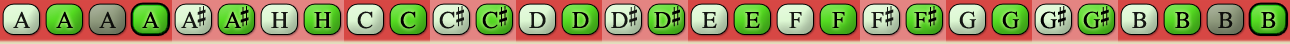
<style>
.page{position:relative;width:1290px;height:44px}
.page>*{position:absolute;margin:0}
.t1{font:24px "OpusChords";letter-spacing:-0.1em;color:#000000}
.t2{font:24px "OpusChords";color:#000000}
.t3{font:24px "OpusChords";letter-spacing:-0.025em;color:#000000}
</style>
<div class="page">
<p class="t1" style="left:181px;top:6px;width:25px;height:22px;opacity:0.9">A#</p>
<p class="t1" style="left:224px;top:6px;width:25px;height:22px">A#</p>
<p class="t2" style="left:439px;top:6px;width:25px;height:23px;opacity:0.9">C#</p>
<p class="t2" style="left:482px;top:6px;width:25px;height:23px">C#</p>
<p class="t3" style="left:611px;top:6px;width:26px;height:22px;opacity:0.9">D#</p>
<p class="t3" style="left:654px;top:6px;width:26px;height:22px">D#</p>
<p class="t2" style="left:871px;top:6px;width:23px;height:22px;opacity:0.9">F#</p>
<p class="t2" style="left:914px;top:6px;width:23px;height:22px">F#</p>
<p class="t3" style="left:1040px;top:6px;width:26px;height:23px">G#</p>
<p class="t3" style="left:1083px;top:6px;width:26px;height:23px">G#</p>
<p class="t2" style="left:13px;top:11px;width:17px;height:17px;opacity:0.9">A</p>
<p class="t2" style="left:56px;top:11px;width:17px;height:17px">A</p>
<p class="t2" style="left:99px;top:11px;width:17px;height:17px;opacity:0.9">A</p>
<p class="t2" style="left:142px;top:11px;width:17px;height:17px">A</p>
<p class="t2" style="left:271px;top:12px;width:17px;height:16px;opacity:0.9">H</p>
<p class="t2" style="left:314px;top:12px;width:17px;height:16px">H</p>
<p class="t2" style="left:357px;top:11px;width:16px;height:18px;opacity:0.9">C</p>
<p class="t2" style="left:400px;top:11px;width:16px;height:18px">C</p>
<p class="t2" style="left:529px;top:12px;width:17px;height:16px;opacity:0.9">D</p>
<p class="t2" style="left:572px;top:12px;width:17px;height:16px">D</p>
<p class="t2" style="left:702px;top:12px;width:15px;height:16px;opacity:0.9">E</p>
<p class="t2" style="left:745px;top:12px;width:15px;height:16px">E</p>
<p class="t2" style="left:789px;top:12px;width:13px;height:16px;opacity:0.9">F</p>
<p class="t2" style="left:832px;top:12px;width:13px;height:16px">F</p>
<p class="t2" style="left:959px;top:11px;width:17px;height:18px;opacity:0.9">G</p>
<p class="t2" style="left:1002px;top:11px;width:17px;height:18px">G</p>
<p class="t2" style="left:1132px;top:12px;width:15px;height:16px;opacity:0.9">B</p>
<p class="t2" style="left:1175px;top:12px;width:15px;height:16px">B</p>
<p class="t2" style="left:1218px;top:12px;width:15px;height:16px;opacity:0.9">B</p>
<p class="t2" style="left:1261px;top:12px;width:15px;height:16px">B</p>
</div>
